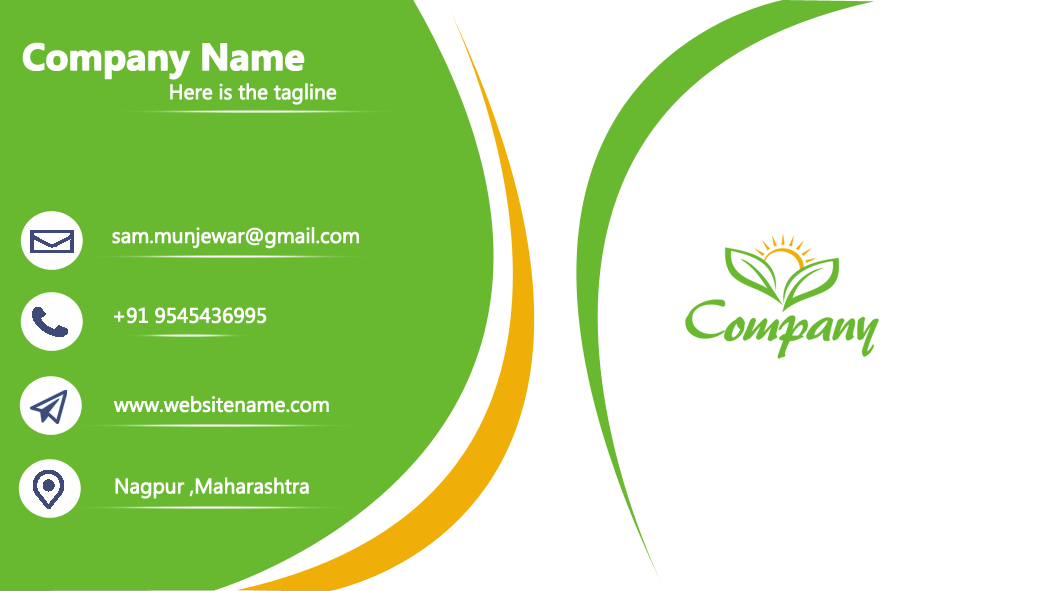
<style>
.page{position:relative;width:1050px;height:591px;background:#ffffff}
.page>*{position:absolute;margin:0}
.t1{font:37.5px "MicrosoftNewTaiLue-Bold";letter-spacing:-0.025em;color:#fefefe;font-weight:bold}
.t2{font:20.8px "MicrosoftNewTaiLue";letter-spacing:-0.025em;color:#fefefe;font-weight:bold}
.t3{font:20.8px "MicrosoftNewTaiLue";letter-spacing:-0.025em;color:#ffffff;font-weight:bold}
</style>
<div class="page">
<p class="t1" style="left:22px;top:42px;width:283px;height:38px">Company Name</p>
<p class="t2" style="left:170px;top:83px;width:167px;height:22px">Here is the tagline</p>
<p class="t3" style="left:112px;top:227px;width:247px;height:22px">sam.munjewar@gmail.com</p>
<p class="t3" style="left:114px;top:307px;width:153px;height:17px">+91 9545436995</p>
<p class="t3" style="left:113px;top:396px;width:216px;height:17px">www.websitename.com</p>
<p class="t3" style="left:115px;top:477px;width:194px;height:22px">Nagpur ,Maharashtra</p>
</div>
